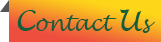
<style>
.page{position:relative;width:161px;height:42px}
.page>*{position:absolute;margin:0}
.t1{font:22px "LucidaHandwriting-Italic";letter-spacing:-0.025em;color:#145f38}
.t2{font:29.3px "LucidaHandwriting-Italic";letter-spacing:-0.025em;color:#145f38}
</style>
<div class="page">
<p class="t1" style="left:17px;top:9px;width:138px;height:24px"><span class="t2">C</span>ontact <span class="t2">U</span>s</p>
</div>
